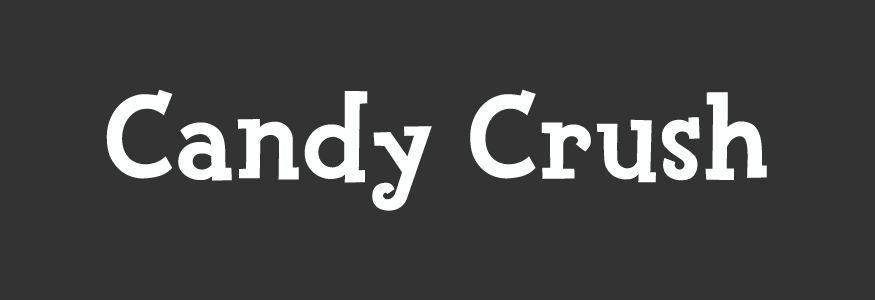
<style>
.page{position:relative;width:875px;height:300px;background:#333333}
.page>*{position:absolute;margin:0}
.t1{font:125px "FinkHeavy";letter-spacing:0.01em;color:#feffff}
</style>
<div class="page">
<p class="t1" style="left:106px;top:89px;width:661px;height:122px">Candy Crush</p>
</div>
